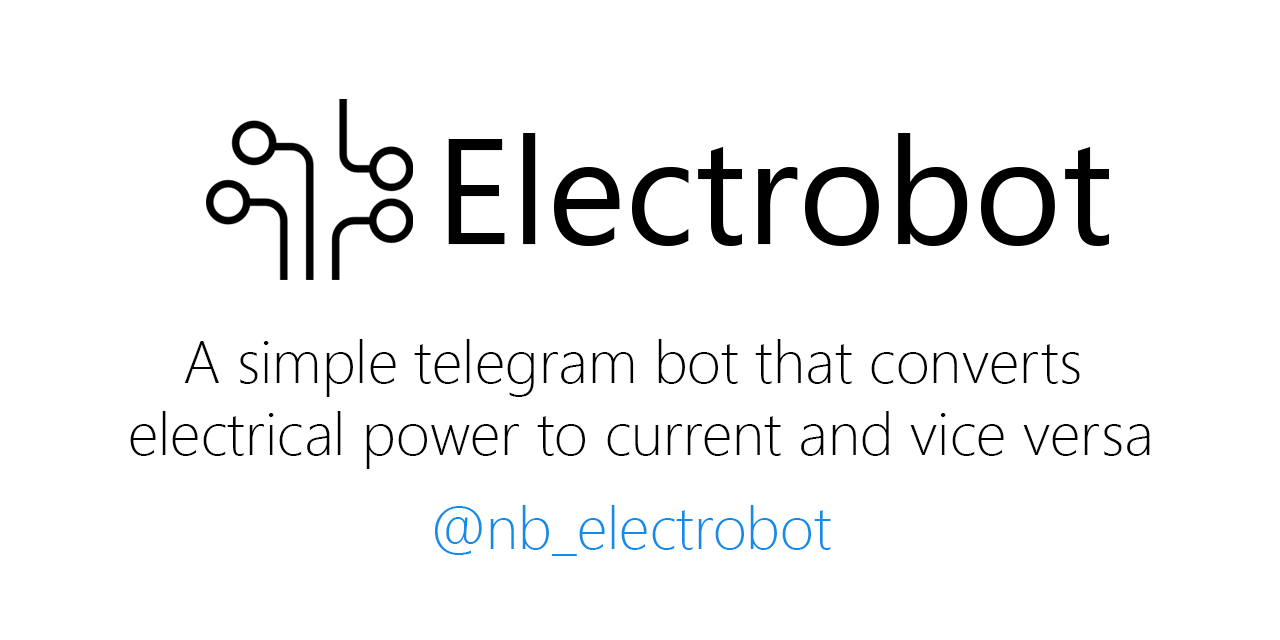
<style>
.page{position:relative;width:1280px;height:640px;background:#ffffff}
.page>*{position:absolute;margin:0}
.t1{font:60px "SegoeUI-Light";color:#000000}
.t2{font:60px "SegoeUI-Light";color:#128ce9}
</style>
<div class="page">
<p class="t1" style="left:130px;top:339px;width:1020px;height:130px;text-align:center">A simple telegram bot that converts <br>electrical power to current and vice versa</p>
<p class="t2" style="left:435px;top:505px;width:396px;height:51px">@nb_electrobot</p>
</div>
